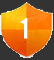
<style>
.page{position:relative;width:54px;height:60px;background:#333333}
.page>*{position:absolute;margin:0}
.t1{font:24px "H2hdrM";color:#ffffff}
</style>
<div class="page">
<p class="t1" style="left:20px;top:18px;width:8px;height:21px">1</p>
</div>
